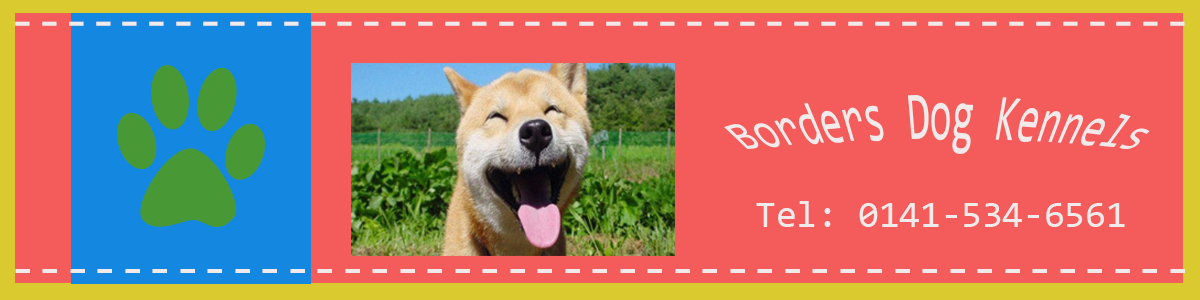
<style>
.page{position:relative;width:1200px;height:300px;background:#f45c5c}
.page>*{position:absolute;margin:0}
.t1{font:12px "Consolas";color:#f1eaea}
.t2{font:8px "Consolas";color:#f1eaea;scale:1.18 1}
.t3{font:37.5px "Consolas";color:#f1eaea}
</style>
<div class="page">
<p class="t1" style="left:15px;top:21px;width:1170px;height:5px">--------------------------------------------</p>
<p class="t2" style="left:724px;top:95px;width:426px;height:59px">Borders Dog Kennels</p>
<p class="t3" style="left:756px;top:201px;width:369px;height:26px">Tel: 0141-534-6561</p>
<p class="t1" style="left:15px;top:269px;width:1170px;height:4px">-------------------------------------------</p>
</div>
